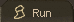
<style>
.page{position:relative;width:74px;height:22px;background:#353024}
.page>*{position:absolute;margin:0}
.t1{font:11px "ArialMT";color:#d1bca0}
</style>
<div class="page">
<p class="t1" style="left:33px;top:9px;width:18px;height:8px">Run</p>
</div>
